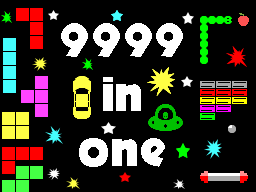
<style>
.page{position:relative;width:256px;height:192px;background:#000000}
.page>*{position:absolute;margin:0}
.t1{font:45.3px "Istanbul";color:#ffffff}
</style>
<div class="page">
<p class="t1" style="left:61px;top:23px;width:122px;height:144px;text-align:center">9999<br>in<br>one</p>
</div>
